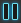
<style>
.page{position:relative;width:21px;height:23px;background:#1a1a1a}
.page>*{position:absolute;margin:0}
.t1{font:19px "Menlo-Bold";letter-spacing:-0.28em;color:#1a1a1a;text-transform:uppercase;scale:1.5 1}
</style>
<div class="page">
<p class="t1" style="left:4px;top:4px;width:13px;height:15px">❙❙</p>
</div>
